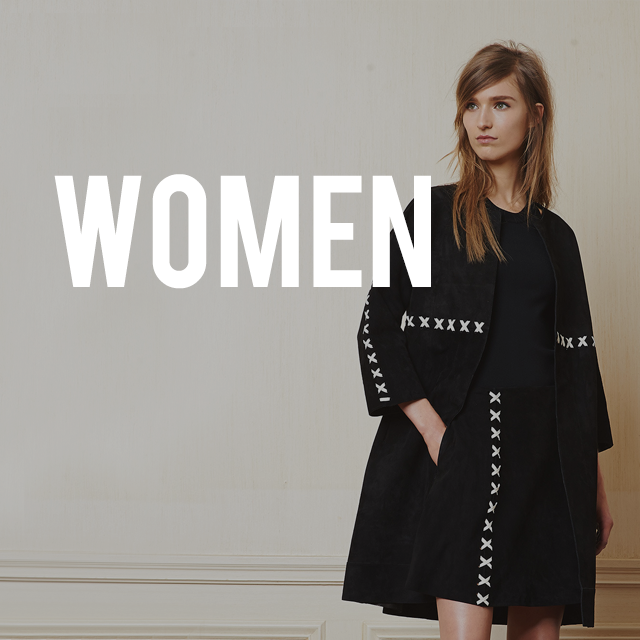
<style>
.page{position:relative;width:640px;height:640px}
.page>*{position:absolute;margin:0}
.t1{font:125px "Bebas";color:#ffffff}
</style>
<div class="page">
<p class="t1" style="left:54px;top:174px;width:377px;height:115px">WOMEN</p>
</div>
